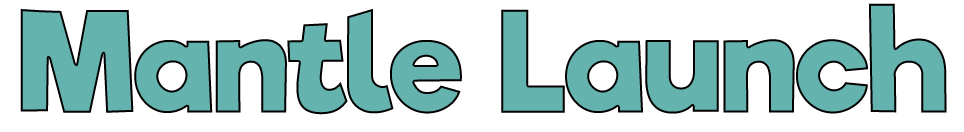
<style>
.page{position:relative;width:964px;height:132px;background:#ffffff}
.page>*{position:absolute;margin:0}
.t1{font:134.8px "RifficFree-Bold";color:#65b3ae}
</style>
<div class="page">
<p class="t1" style="left:20px;top:3px;width:927px;height:112px">Mantle Launch</p>
</div>
